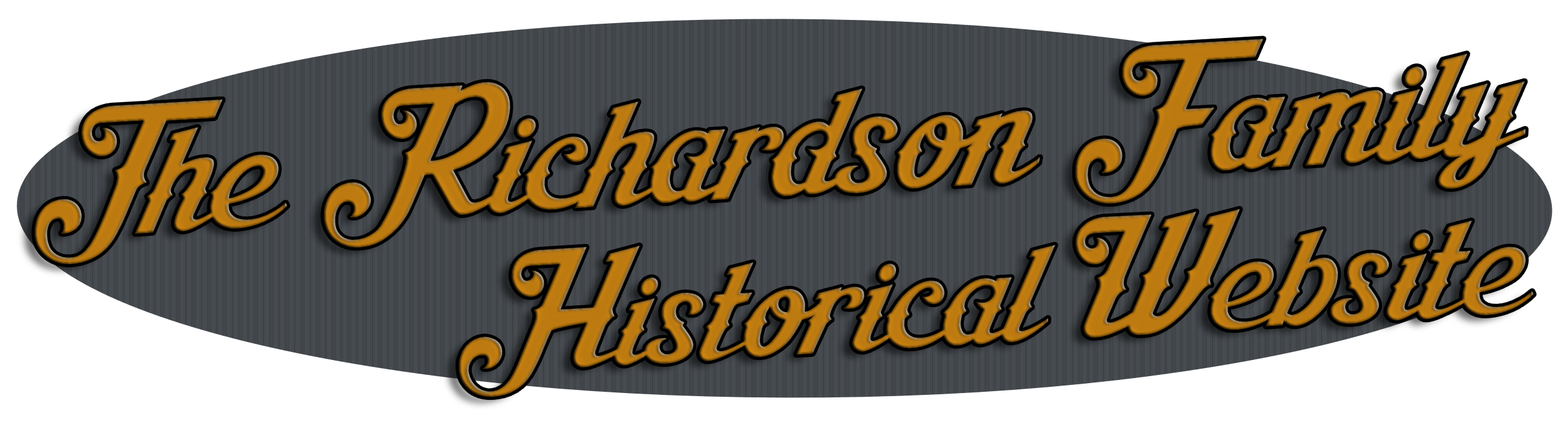
<style>
.page{position:relative;width:1568px;height:436px;background:#ffffff}
.page>*{position:absolute;margin:0}
.t1{font:132.5px "AishaScript";color:#bc7a10}
.t2{font:122.6px "AishaScript";color:#bc7a10}
</style>
<div class="page">
<p class="t1" style="left:34px;top:39px;width:1500px;height:358px;rotate:-3deg">The Richardson Family <span class="t2">Historical Website</span></p>
</div>
